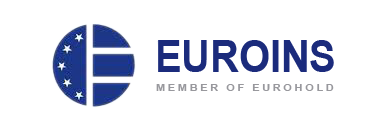
<style>
.page{position:relative;width:385px;height:131px;background:#ffffff}
.page>*{position:absolute;margin:0}
.t1{font:45px "Arial-BoldMT";color:#1b2b7c;scale:0.88 1}
.t2{font:9.7px "Arial-BoldMT";letter-spacing:0.2em;color:#98989d;scale:1.19 1}
</style>
<div class="page">
<p class="t1" style="left:158px;top:40px;width:176px;height:32px">EUROINS</p>
<p class="t2" style="left:156px;top:84px;width:178px;height:7px">MEMBER OF EUROHOLD</p>
</div>
